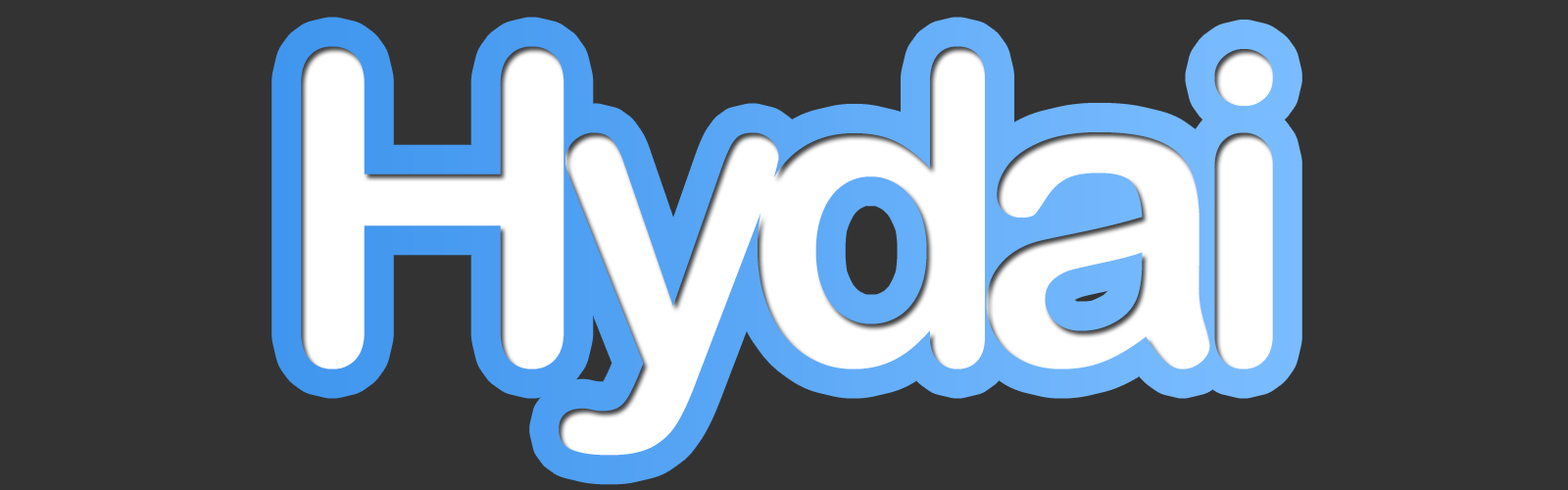
<style>
.page{position:relative;width:1568px;height:490px;background:#333333}
.page>*{position:absolute;margin:0}
.t1{font:435.6px "ArialRoundedMTBold";letter-spacing:-0.1em;color:#ffffff}
</style>
<div class="page">
<p class="t1" style="left:301px;top:46px;width:972px;height:410px">Hydai</p>
</div>
